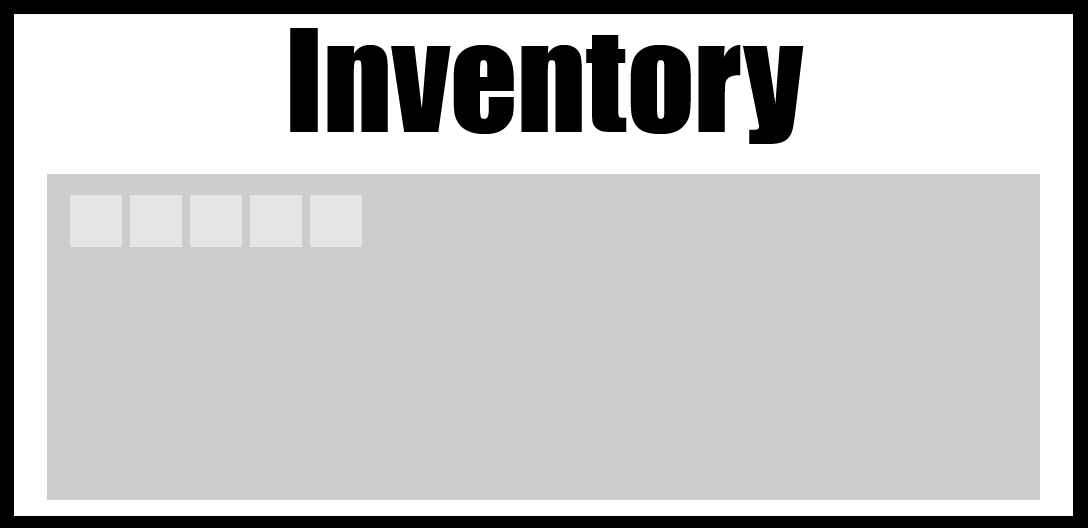
<style>
.page{position:relative;width:1088px;height:528px;background:#cccccc}
.page>*{position:absolute;margin:0}
.t1{font:132.1px "Impact";color:#000000}
</style>
<div class="page">
<p class="t1" style="left:290px;top:28px;width:514px;height:116px">Inventory</p>
</div>
